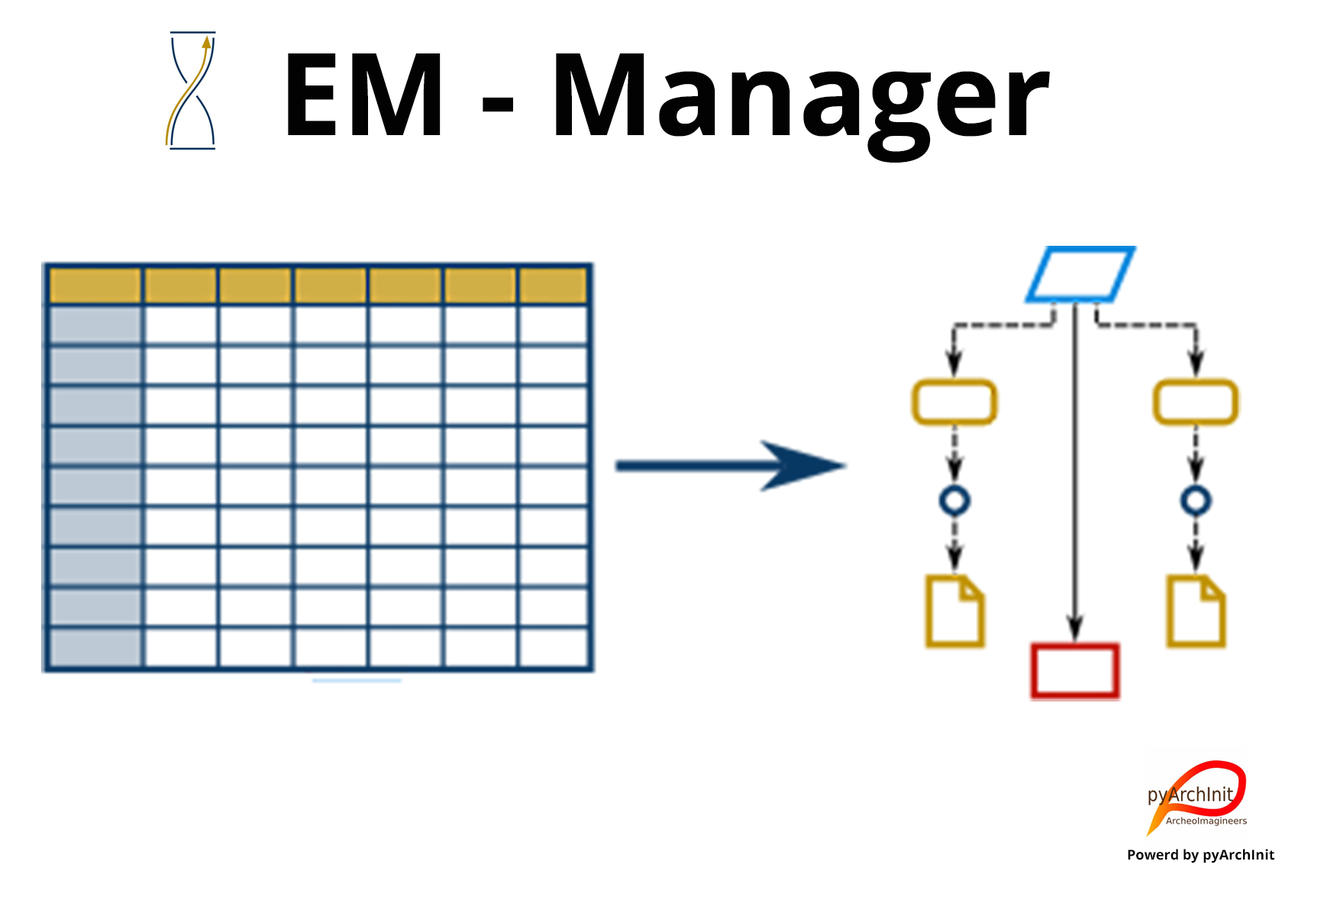
<style>
.page{position:relative;width:1324px;height:900px;background:#ffffff}
.page>*{position:absolute;margin:0}
.t1{font:114.6px "OpenSans-Bold";color:#020202}
.t2{font:13.7px "OpenSans-Bold";color:#020202}
</style>
<div class="page">
<p class="t1" style="left:288px;top:53px;width:762px;height:110px">EM - Manager</p>
<p class="t2" style="left:1128px;top:849px;width:147px;height:15px">Powerd by pyArchInit</p>
</div>
